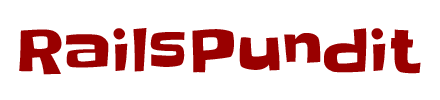
<style>
.page{position:relative;width:440px;height:100px;background:#ffffff}
.page>*{position:absolute;margin:0}
.t1{font:60px "Slackey";color:#990000}
</style>
<div class="page">
<p class="t1" style="left:19px;top:28px;width:402px;height:47px">RailsPundit</p>
</div>
